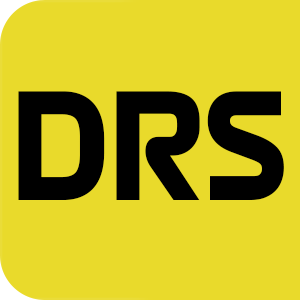
<style>
.page{position:relative;width:300px;height:300px;background:#e9da2b}
.page>*{position:absolute;margin:0}
.t1{font:144.8px "Formula1-Display-Bold";color:#000000;scale:0.79 1}
</style>
<div class="page">
<p class="t1" style="left:18px;top:91px;width:266px;height:109px">DRS</p>
</div>
